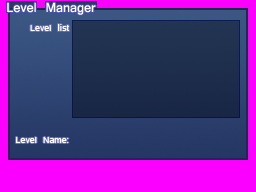
<style>
.page{position:relative;width:256px;height:192px;background:#fc00ff}
.page>*{position:absolute;margin:0}
.t1{font:20px "Kartika";color:#ffffff}
.t2{font:14px/8px "Kartika";color:#ffffff}
.t3{font:16px/8px "Kartika";color:#ffffff}
</style>
<div class="page">
<p class="t1" style="left:7px;top:2px;width:89px;height:13px">Level Manager</p>
<p class="t2" style="left:16px;top:24px;width:53px;height:119px;text-align:right">Level <span class="t3">li</span>st<br><br><br><br><br><br><br><br><br><br><br><br><br><br>Level Name:</p>
</div>
